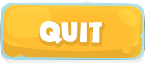
<style>
.page{position:relative;width:145px;height:63px}
.page>*{position:absolute;margin:0}
.t1{font:32px "iCielSoupofJustice";letter-spacing:0.01em;color:#ffffff}
</style>
<div class="page">
<p class="t1" style="left:39px;top:21px;width:63px;height:23px">QUIT</p>
</div>
